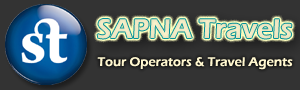
<style>
.page{position:relative;width:300px;height:90px;background:#333333}
.page>*{position:absolute;margin:0}
.t1{font:28px "ErasITC-Demi";color:#fff7cf}
.t2{font:13px "ErasITC-Demi";color:#fff7cf}
</style>
<div class="page">
<p class="t1" style="left:97px;top:19px;width:195px;height:20px">SAPNA Travels</p>
<p class="t2" style="left:97px;top:57px;width:196px;height:13px">Tour Operators &amp; Travel Agents</p>
</div>
